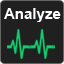
<style>
.page{position:relative;width:64px;height:64px;background:#202020}
.page>*{position:absolute;margin:0}
.t1{font:15px "Arial-BoldMT";color:#ffffff}
</style>
<div class="page">
<p class="t1" style="left:4px;top:8px;width:57px;height:14px">Analyze</p>
</div>
